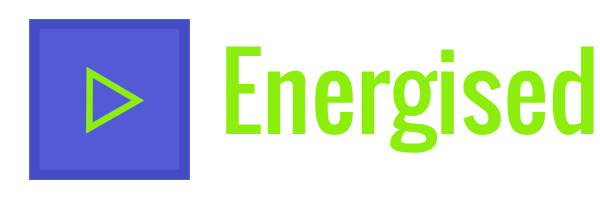
<style>
.page{position:relative;width:600px;height:200px;background:#ffffff}
.page>*{position:absolute;margin:0}
.t1{font:100px "Oswald-Regular";color:#8cee0c}
</style>
<div class="page">
<p class="t1" style="left:226px;top:46px;width:368px;height:107px">Energised</p>
</div>
